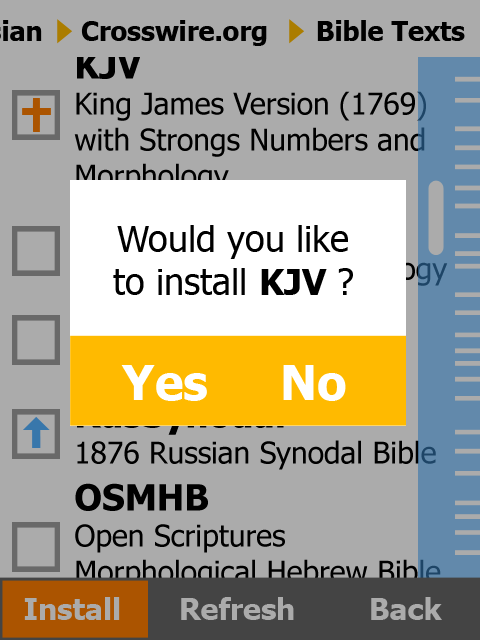
<style>
.page{position:relative;width:480px;height:640px;background:#ababab}
.page>*{position:absolute;margin:0}
.t1{font:26.8px "Tahoma-Bold";color:#000000}
.t2{font:30px "Tahoma";color:#000000}
.t3{font:36px "Tahoma-Bold";color:#000000}
.t4{font:36px "Tahoma";color:#000000}
.t5{font:48px "Tahoma-Bold";color:#ffffff}
.t6{font:30px "Tahoma"}
.t7{font:36px "Tahoma-Bold"}
.t8{font:30px "Tahoma-Bold";color:#ababab}
</style>
<div class="page">
<p class="t1" style="left:81px;top:20px;width:186px;height:26px">Crosswire.org</p>
<p class="t1" style="left:317px;top:20px;width:148px;height:21px">Bible Texts</p>
<p class="t2" style="left:74px;top:52px;width:352px;height:141px"><span class="t3">KJV<br></span>King James Version (1769) with Strongs Numbers and Morphology</p>
<p class="t4" style="left:113px;top:225px;width:240px;height:70px;text-align:center">Would you like<br>to install <span class="t3">KJV </span>?</p>
<p class="t5" style="left:121px;top:365px;width:86px;height:36px">Yes</p>
<p class="t5" style="left:283px;top:365px;width:63px;height:36px">No</p>
<p class="t6" style="left:77px;top:400px;width:359px;height:70px"><span class="t7">RusSynodal<br></span>1876 Russian Synodal Bible</p>
<p class="t2" style="left:75px;top:483px;width:366px;height:142px"><span class="t3">OSMHB<br></span>Open Scriptures Morphological Hebrew Bible (morphology forthcoming)</p>
<p class="t8" style="left:24px;top:597px;width:96px;height:23px">Install</p>
<p class="t8" style="left:181px;top:597px;width:113px;height:23px">Refresh</p>
<p class="t8" style="left:371px;top:597px;width:71px;height:23px">Back</p>
</div>
